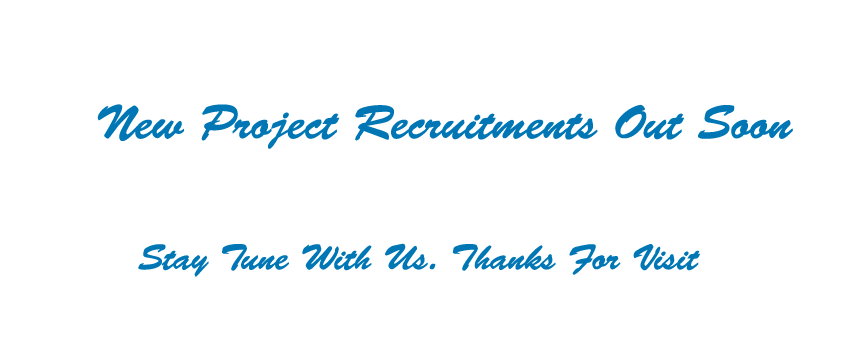
<style>
.page{position:relative;width:850px;height:340px;background:#ffffff}
.page>*{position:absolute;margin:0}
.t1{font:48px "BrushScriptStd";color:#0077b4}
.t2{font:36px "BrushScriptStd";color:#0077b4}
</style>
<div class="page">
<p class="t1" style="left:97px;top:104px;width:696px;height:45px">New Project Recruitments Out Soon</p>
<p class="t2" style="left:138px;top:243px;width:562px;height:34px">Stay Tune With Us. Thanks For Visit</p>
</div>
